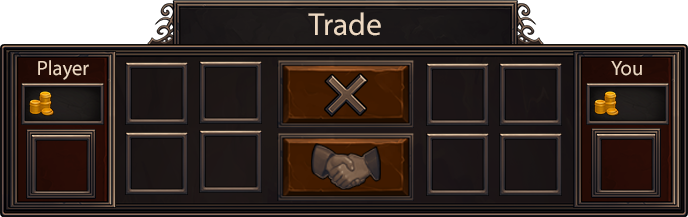
<style>
.page{position:relative;width:688px;height:217px}
.page>*{position:absolute;margin:0}
.t1{font:31.7px "MyriadPro-Regular";color:#eed9c2}
.t2{font:20.8px "MyriadPro-Regular";color:#eed9c2}
</style>
<div class="page">
<p class="t1" style="left:308px;top:12px;width:73px;height:24px">Trade</p>
<p class="t2" style="left:38px;top:60px;width:51px;height:20px">Player</p>
<p class="t2" style="left:611px;top:61px;width:31px;height:15px">You</p>
</div>
